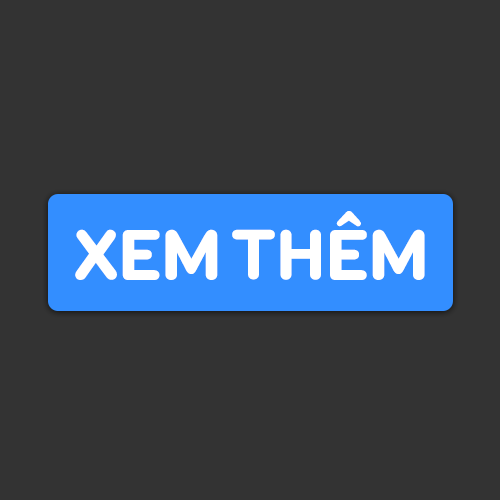
<style>
.page{position:relative;width:500px;height:500px;background:#333333}
.page>*{position:absolute;margin:0}
.t1{font:72.5px "#9Slide03BoosterNextFYBlack-Reg";letter-spacing:-0.02em;color:#ffffff}
</style>
<div class="page">
<p class="t1" style="left:75px;top:211px;width:350px;height:69px">XEM THÊM</p>
</div>
